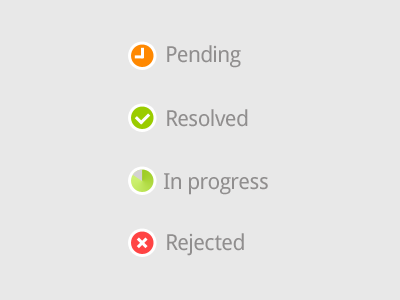
<style>
.page{position:relative;width:400px;height:300px;background:#e8e8e8}
.page>*{position:absolute;margin:0}
.t1{font:22px "DroidSans";letter-spacing:-0.025em;color:#908e8e}
</style>
<div class="page">
<p class="t1" style="left:167px;top:45px;width:74px;height:23px">Pending</p>
<p class="t1" style="left:167px;top:109px;width:81px;height:18px">Resolved</p>
<p class="t1" style="left:164px;top:173px;width:104px;height:22px">In progress</p>
<p class="t1" style="left:167px;top:233px;width:77px;height:23px">Rejected</p>
</div>
